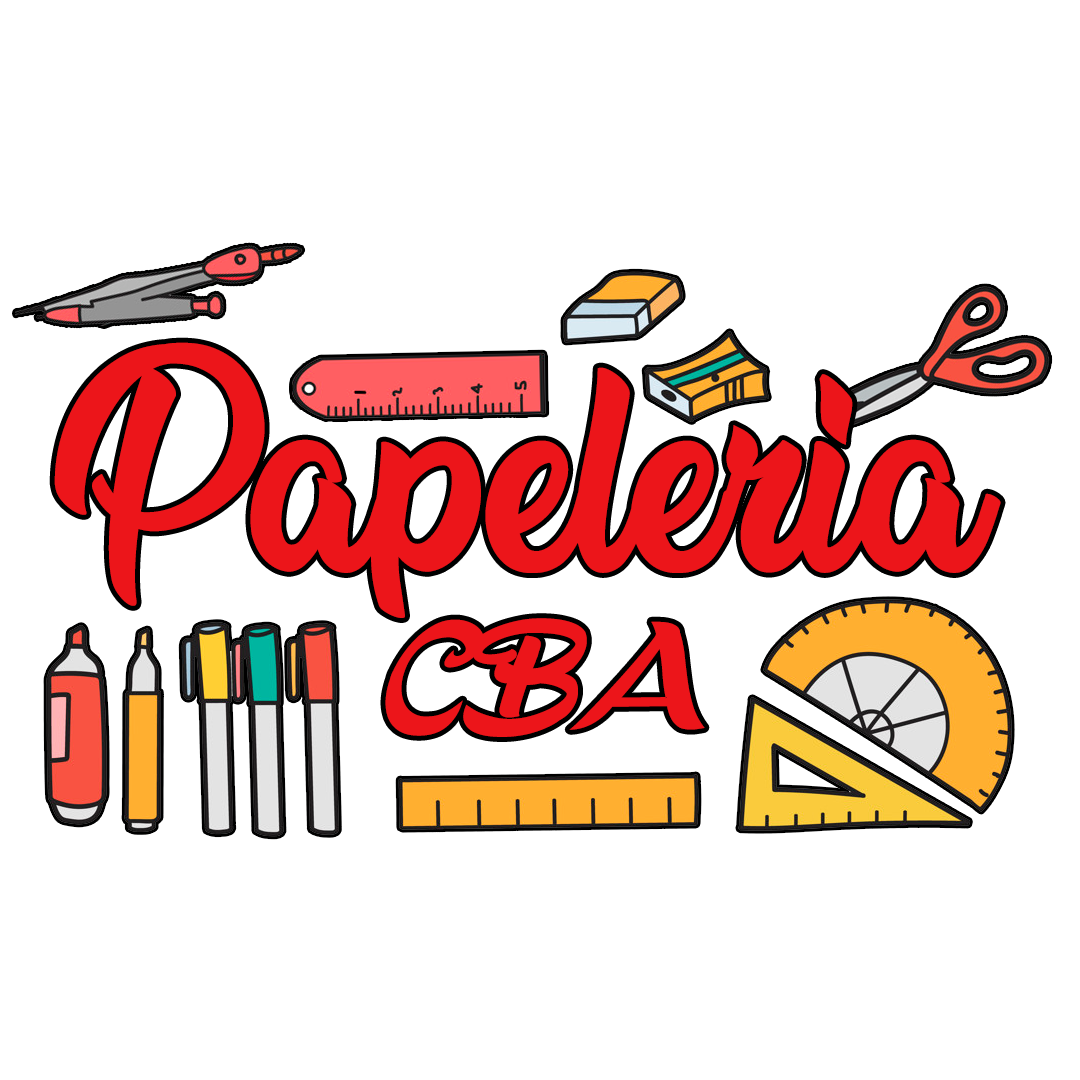
<style>
.page{position:relative;width:1080px;height:1080px;background:#ffffff}
.page>*{position:absolute;margin:0}
.t1{font:220px "RuntotheHillsPersonalUse";color:#ec151a;scale:0.97 1}
.t2{font:220px "DeathBeforeChocolatePersonalUse";color:#ec151a;scale:0.97 1}
</style>
<div class="page">
<p class="t1" style="left:54px;top:342px;width:947px;height:276px">Papeleria</p>
<p class="t2" style="left:385px;top:618px;width:320px;height:119px">CBA</p>
</div>
